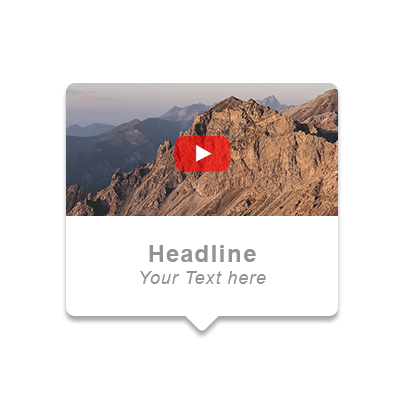
<style>
.page{position:relative;width:400px;height:400px;background:#ffffff}
.page>*{position:absolute;margin:0}
.t1{font:18px "Arial-ItalicMT";letter-spacing:0.05em;color:#939393}
.t2{font:24px "Arial-BoldMT";letter-spacing:0.05em;color:#939393}
</style>
<div class="page">
<p class="t1" style="left:140px;top:245px;width:126px;height:39px;text-align:center"><span class="t2">Headline<br></span>Your Text here</p>
</div>
